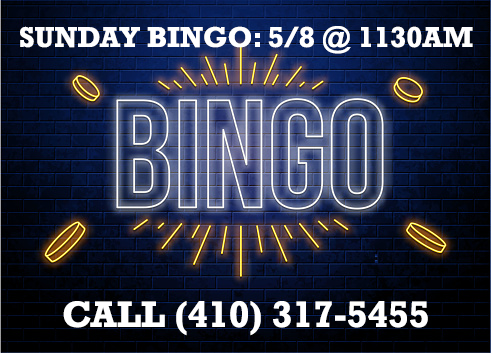
<style>
.page{position:relative;width:491px;height:353px}
.page>*{position:absolute;margin:0}
.t1{font:29.2px "Rockwell-Bold";color:#ffffff}
.t2{font:37.5px "Rockwell-Bold";color:#ffffff}
</style>
<div class="page">
<p class="t1" style="left:20px;top:26px;width:453px;height:28px">SUNDAY BINGO: 5/8 @ 1130AM</p>
<p class="t2" style="left:63px;top:301px;width:365px;height:35px">CALL (410) 317-5455</p>
</div>
